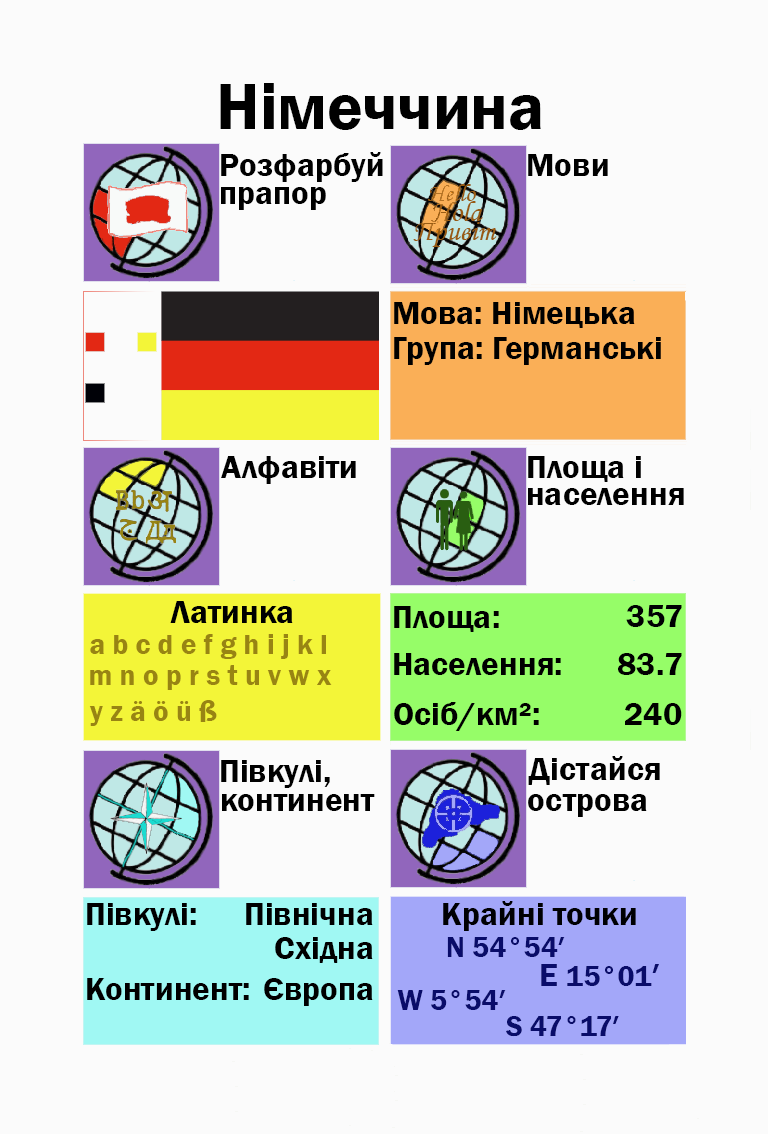
<style>
.page{position:relative;width:768px;height:1134px;background:#fbfbfb}
.page>*{position:absolute;margin:0}
.t1{font:66.7px "FranklinGothic-Demi";color:#000000}
.t2{font:33.3px "FranklinGothic-Demi";color:#000000}
.t3{font:33.3px "FranklinGothic-Demi";color:#000003}
.t4{font:29.2px "FranklinGothic-Demi";color:#988413}
.t5{font:29.2px "FranklinGothic-Demi";color:#090c69}
.t6{font:33.3px "FranklinGothic-Demi";color:#090c69}
</style>
<div class="page">
<p class="t1" style="left:220px;top:83px;width:321px;height:47px">Німеччина</p>
<p class="t2" style="left:221px;top:152px;width:162px;height:30px">Розфарбуй</p>
<p class="t2" style="left:528px;top:154px;width:80px;height:22px">Мови</p>
<p class="t2" style="left:221px;top:187px;width:105px;height:23px">прапор</p>
<p class="t2" style="left:394px;top:302px;width:241px;height:26px">Мова: Німецька</p>
<p class="t2" style="left:394px;top:337px;width:267px;height:28px">Група: Германські</p>
<p class="t2" style="left:221px;top:456px;width:135px;height:28px">Алфавіти</p>
<p class="t2" style="left:528px;top:456px;width:113px;height:26px">Площа і</p>
<p class="t2" style="left:528px;top:488px;width:156px;height:17px">населення</p>
<p class="t2" style="left:170px;top:601px;width:123px;height:22px">Латинка</p>
<p class="t2" style="left:394px;top:606px;width:105px;height:26px">Площа:</p>
<p class="t3" style="left:626px;top:605px;width:56px;height:22px">357</p>
<p class="t4" style="left:90px;top:634px;width:236px;height:25px">a b c d e f g h i j k l</p>
<p class="t2" style="left:394px;top:653px;width:167px;height:22px">Населення:</p>
<p class="t2" style="left:618px;top:653px;width:64px;height:22px">83.7</p>
<p class="t4" style="left:90px;top:665px;width:242px;height:25px">m n o p r s t u v w x</p>
<p class="t4" style="left:89px;top:700px;width:128px;height:26px">y z ä ö ü ß</p>
<p class="t2" style="left:394px;top:702px;width:145px;height:29px">Осіб/км²:</p>
<p class="t2" style="left:625px;top:703px;width:57px;height:22px">240</p>
<p class="t2" style="left:221px;top:760px;width:109px;height:28px">Півкулі,</p>
<p class="t2" style="left:528px;top:756px;width:132px;height:29px">Дістайся</p>
<p class="t2" style="left:222px;top:794px;width:153px;height:17px">континент</p>
<p class="t2" style="left:528px;top:794px;width:119px;height:23px">острова</p>
<p class="t2" style="left:87px;top:903px;width:109px;height:28px">Півкулі:</p>
<p class="t2" style="left:246px;top:903px;width:127px;height:22px">Північна</p>
<p class="t3" style="left:443px;top:901px;width:193px;height:30px">Крайні точки</p>
<p class="t2" style="left:275px;top:937px;width:98px;height:26px">Східна</p>
<p class="t5" style="left:447px;top:937px;width:118px;height:20px">N 54°54′</p>
<p class="t5" style="left:541px;top:964px;width:118px;height:22px"><span class="t6">E </span>15°01<span class="t6">′</span></p>
<p class="t2" style="left:87px;top:978px;width:162px;height:22px">Континент:</p>
<p class="t2" style="left:264px;top:978px;width:109px;height:28px">Європа</p>
<p class="t5" style="left:397px;top:990px;width:109px;height:20px">W 5°54′</p>
<p class="t5" style="left:506px;top:1016px;width:113px;height:21px">S 47°17′</p>
</div>
